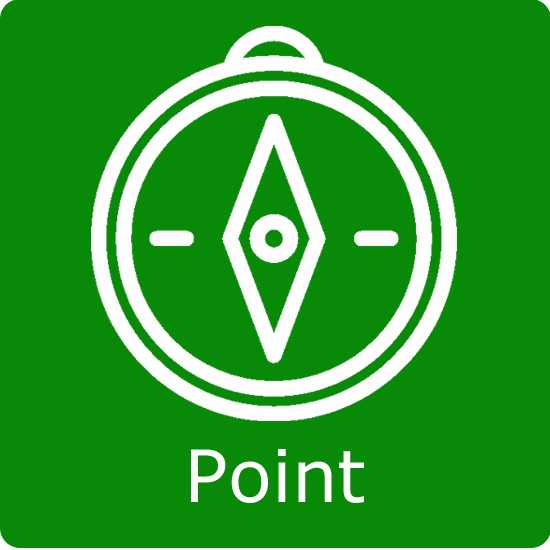
<style>
.page{position:relative;width:550px;height:550px;background:#088a08}
.page>*{position:absolute;margin:0}
.t1{font:72.2px "Verdana";color:#ffffff}
</style>
<div class="page">
<p class="t1" style="left:191px;top:449px;width:173px;height:54px">Point</p>
</div>
